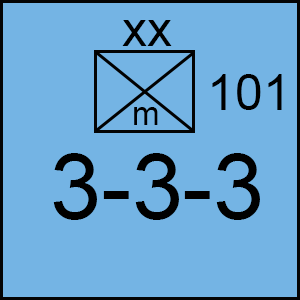
<style>
.page{position:relative;width:300px;height:300px;background:#74b4e4}
.page>*{position:absolute;margin:0}
.t1{font:50px "ArialMT";color:#000000}
.t2{font:33.3px "ArialMT";color:#000000}
.t3{font:91.7px "ArialMT";color:#000000}
</style>
<div class="page">
<p class="t1" style="left:122px;top:20px;width:50px;height:26px">xx</p>
<p class="t1" style="left:212px;top:74px;width:70px;height:36px">101</p>
<p class="t2" style="left:134px;top:107px;width:24px;height:18px">m</p>
<p class="t3" style="left:53px;top:153px;width:207px;height:67px">3-3-3</p>
</div>
